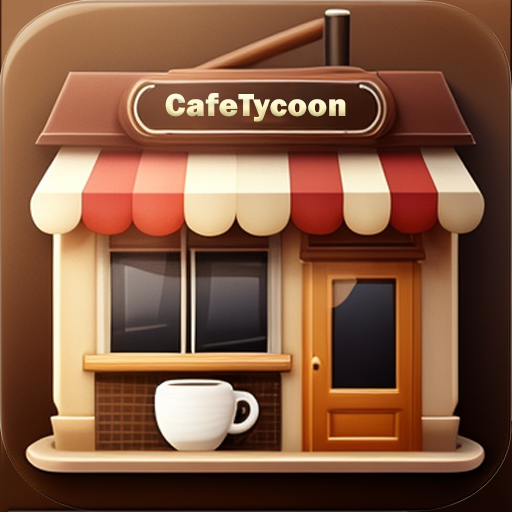
<style>
.page{position:relative;width:512px;height:512px}
.page>*{position:absolute;margin:0}
.t1{font:33.1px "FranklinGothic-Heavy";letter-spacing:0.01em}
</style>
<div class="page">
<p class="t1" style="left:165px;top:93px;width:181px;height:29px">CafeTycoon</p>
</div>
